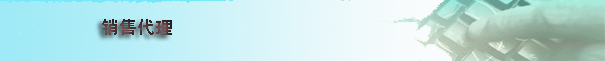
<style>
.page{position:relative;width:605px;height:61px}
.page>*{position:absolute;margin:0}
.t1{font:18px "SimHei"}
</style>
<div class="page">
<p class="t1" style="left:102px;top:19px;width:70px;height:16px">销售代理</p>
</div>
